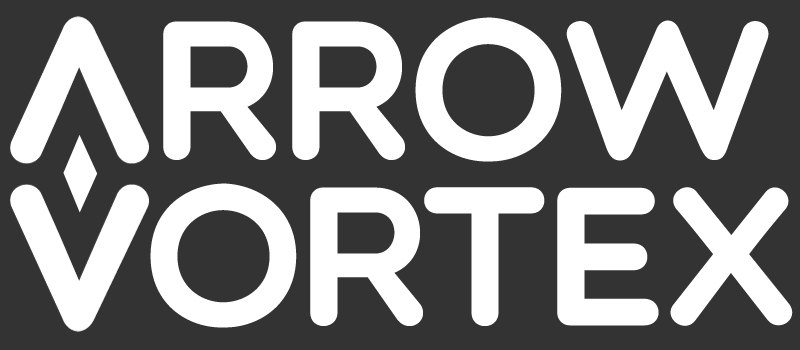
<style>
.page{position:relative;width:800px;height:350px;background:#333333}
.page>*{position:absolute;margin:0}
.t1{font:197.3px/165.5px "Multicolore";letter-spacing:-0.075em;color:#ffffff;font-weight:bold}
.t2{font:24px/165.5px "Multicolore";color:#ffffff;font-weight:bold}
.t3{font:197.3px/165.5px "Multicolore";letter-spacing:-0.05em;color:#ffffff;font-weight:bold}
.t4{font:197.3px/165.5px "Multicolore";letter-spacing:-0.02em;color:#ffffff;font-weight:bold}
</style>
<div class="page">
<p class="t1" style="left:150px;top:17px;width:643px;height:311px"><span class="t2"> </span><span class="t3">rr</span>ow<br>or<span class="t3">t</span><span class="t4">ex</span></p>
</div>
